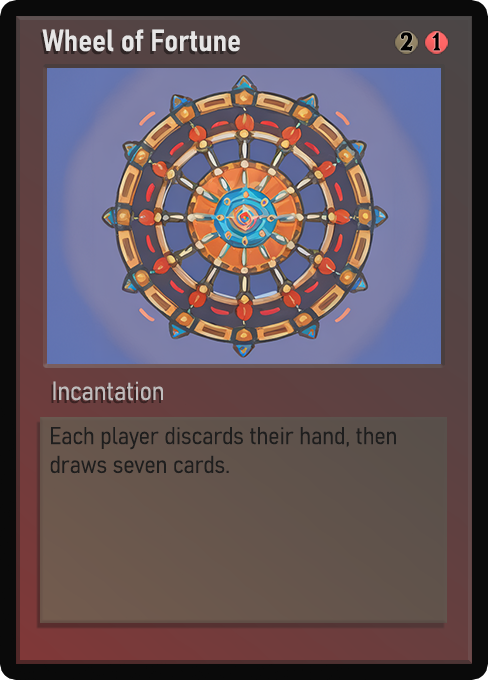
<style>
.page{position:relative;width:488px;height:680px}
.page>*{position:absolute;margin:0}
.t1{font:30px "Bahnschrift-SemiBoldSemiCondensed";color:#f2f2f2;font-weight:bold}
.t2{font:25px "WTRRoycroft";color:#000000;font-weight:bold;scale:1.09 1}
.t3{font:26px "Bahnschrift-LightSemiCondensed";color:#c8c8c8;font-weight:bold}
.t4{font:24px "Bahnschrift-LightSemiCondensed";color:#1e1e1e;font-weight:bold}
</style>
<div class="page">
<p class="t1" style="left:42px;top:29px;width:198px;height:23px;opacity:0.9">Wheel of Fortune</p>
<p class="t2" style="left:400px;top:32px;width:13px;height:19px">2</p>
<p class="t2" style="left:432px;top:32px;width:9px;height:19px">1</p>
<p class="t3" style="left:53px;top:381px;width:110px;height:20px;opacity:0.9">Incantation</p>
<p class="t4" style="left:50px;top:427px;width:346px;height:47px">Each player discards their hand, then draws seven cards.</p>
</div>
